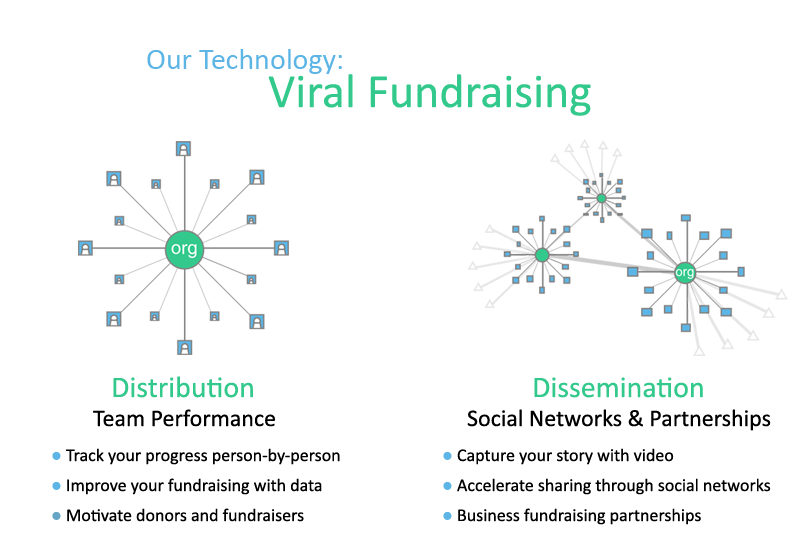
<style>
.page{position:relative;width:810px;height:560px;background:#ffffff}
.page>*{position:absolute;margin:0}
.t1{font:30px "Calibri";color:#5cb5e5}
.t2{font:48px "Calibri";color:#33c98c}
.t3{font:30px "Calibri";color:#33c98c}
.t4{font:24px "Calibri";color:#000000}
.t5{font:18px/30px "Calibri";color:#000000}
.t6{font:18px/30px "Calibri";color:#5cb5e5}
.t7{font:18px/30px "Calibri";color:#67a5c7}
</style>
<div class="page">
<p class="t1" style="left:147px;top:49px;width:195px;height:25px">Our Technology:</p>
<p class="t2" style="left:268px;top:74px;width:323px;height:42px">Viral Fundraising</p>
<p class="t3" style="left:113px;top:376px;width:140px;height:22px">Distribution</p>
<p class="t3" style="left:534px;top:377px;width:169px;height:21px">Dissemination</p>
<p class="t4" style="left:93px;top:409px;width:182px;height:18px">Team Performance</p>
<p class="t4" style="left:467px;top:409px;width:304px;height:22px">Social Networks &amp; Partnerships</p>
<p class="t5" style="left:52px;top:448px;width:288px;height:74px"><span class="t6">●</span> Track your progress person-by-person<br><span class="t6">●</span> Improve your fundraising with data<br><span class="t7">●</span> Motivate donors and fundraisers</p>
<p class="t5" style="left:443px;top:448px;width:328px;height:77px"><span class="t6">●</span> Capture your story with video<br><span class="t6">●</span> Accelerate sharing through social networks<br><span class="t6">●</span> Business fundraising partnerships</p>
</div>
